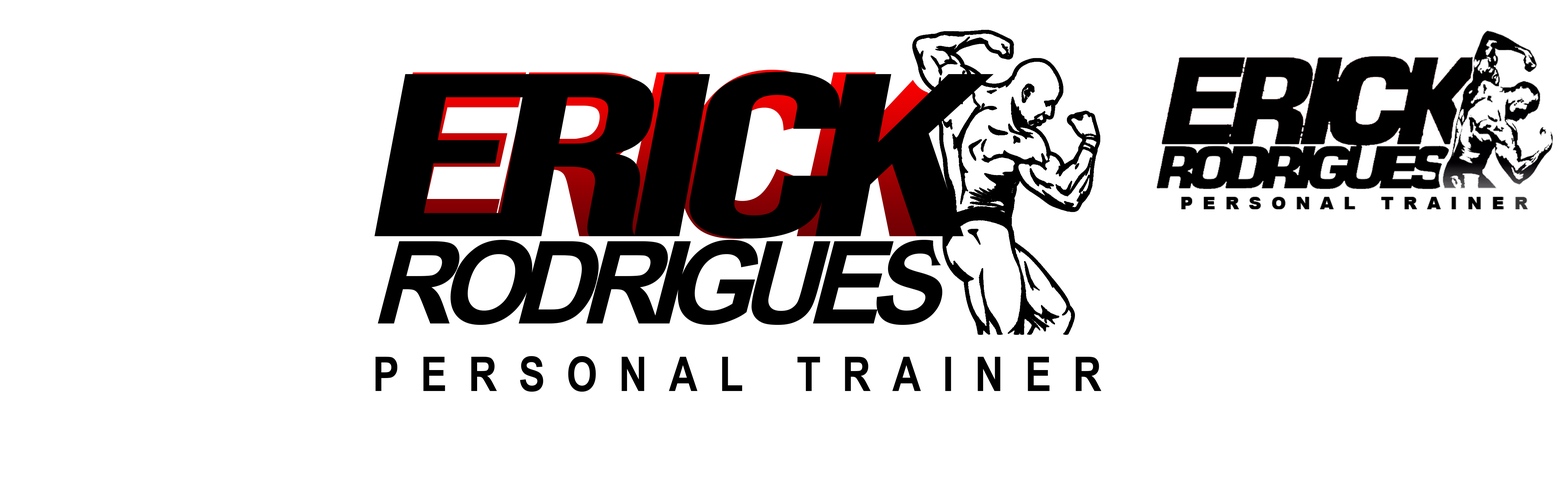
<style>
.page{position:relative;width:1568px;height:481px;background:#ffffff}
.page>*{position:absolute;margin:0}
.t1{font:235.9px "BebasNeue-Regular";letter-spacing:-0.066em;color:#000000;scale:1.73 1}
.t2{font:47.5px "Arial-BoldMT";letter-spacing:0.544em;color:#000000;scale:0.83 1}
</style>
<div class="page">
<p class="t1" style="left:374px;top:72px;width:620px;height:167px">ERICK</p>
<p class="t2" style="left:375px;top:356px;width:727px;height:36px">PERSONAL TRAINER</p>
</div>
